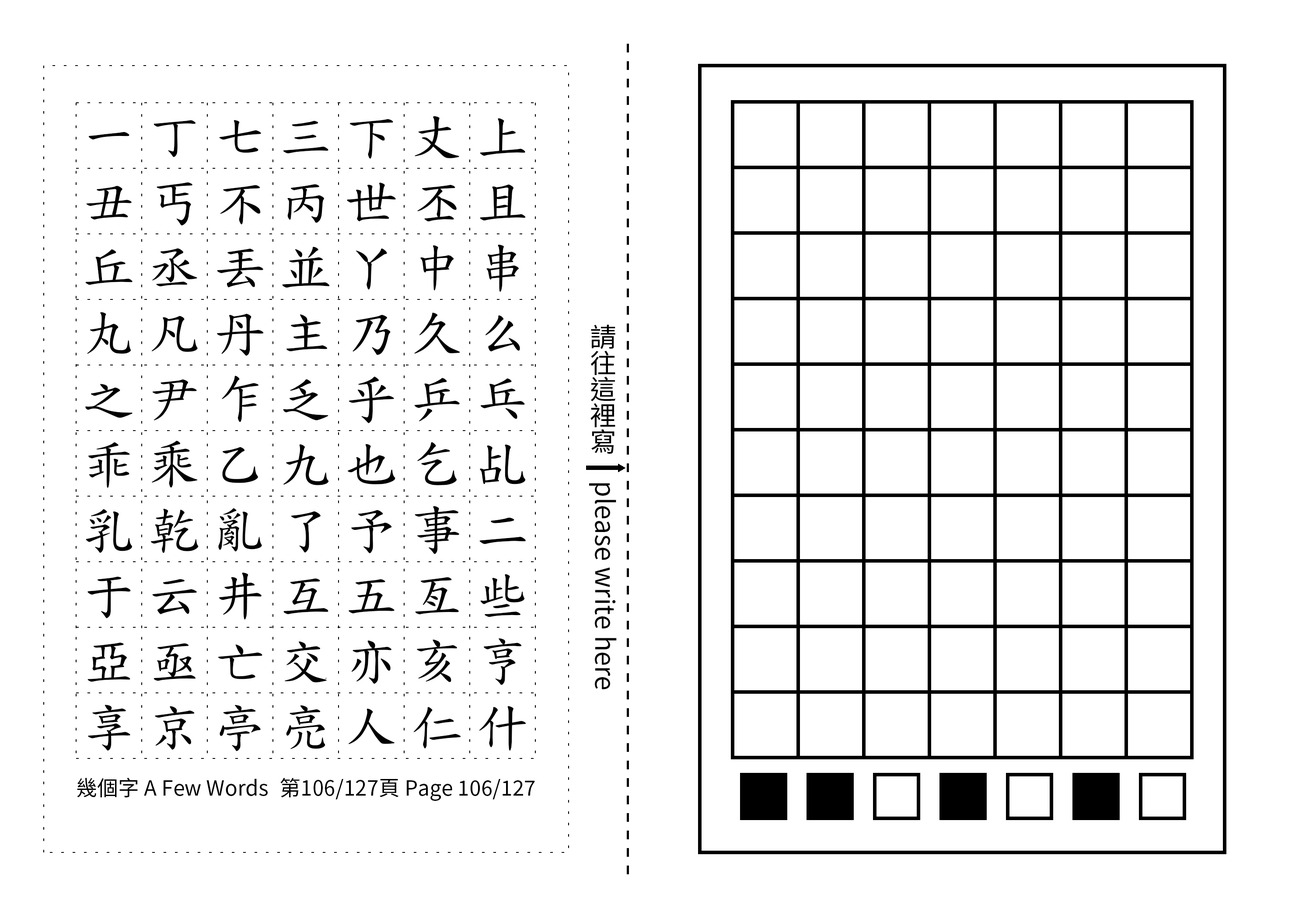
<style>
.page{position:relative;width:1299px;height:918px;background:#ffffff}
.page>*{position:absolute;margin:0}
.t1{font:52.5px/65.6px "TW-Kai-98_1";letter-spacing:0.25em;color:#000000}
.t2{font:26.2px "SourceHanSansTC-Regular";color:#000000}
.t3{font:21px "SourceHanSansTC-Regular";color:#000000}
</style>
<div class="page">
<p class="t1" style="left:85px;top:116px;width:441px;height:636px;text-align:center">一丁七三下丈上丑丐不丙世丕且丘丞丟並丫中串丸凡丹主乃久么之尹乍乏乎乒乓乖乘乙九也乞乩乳乾亂了予事二于云井互五亙些亞亟亡交亦亥亨享京亭亮人仁什</p>
<p class="t2" style="left:589px;top:324px;width:28px;height:366px;text-align:center">請往這裡寫　please write here</p>
<p class="t3" style="left:77px;top:778px;width:191px;height:20px">幾個字 A Few Words</p>
<p class="t3" style="left:280px;top:778px;width:255px;height:23px">第106/127頁 Page 106/127</p>
</div>
